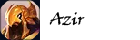
<style>
.page{position:relative;width:140px;height:40px;background:#ffffff}
.page>*{position:absolute;margin:0}
.t1{font:12px "VinerHandITC";color:#000000}
</style>
<div class="page">
<p class="t1" style="left:49px;top:12px;width:36px;height:14px">Azir</p>
</div>
